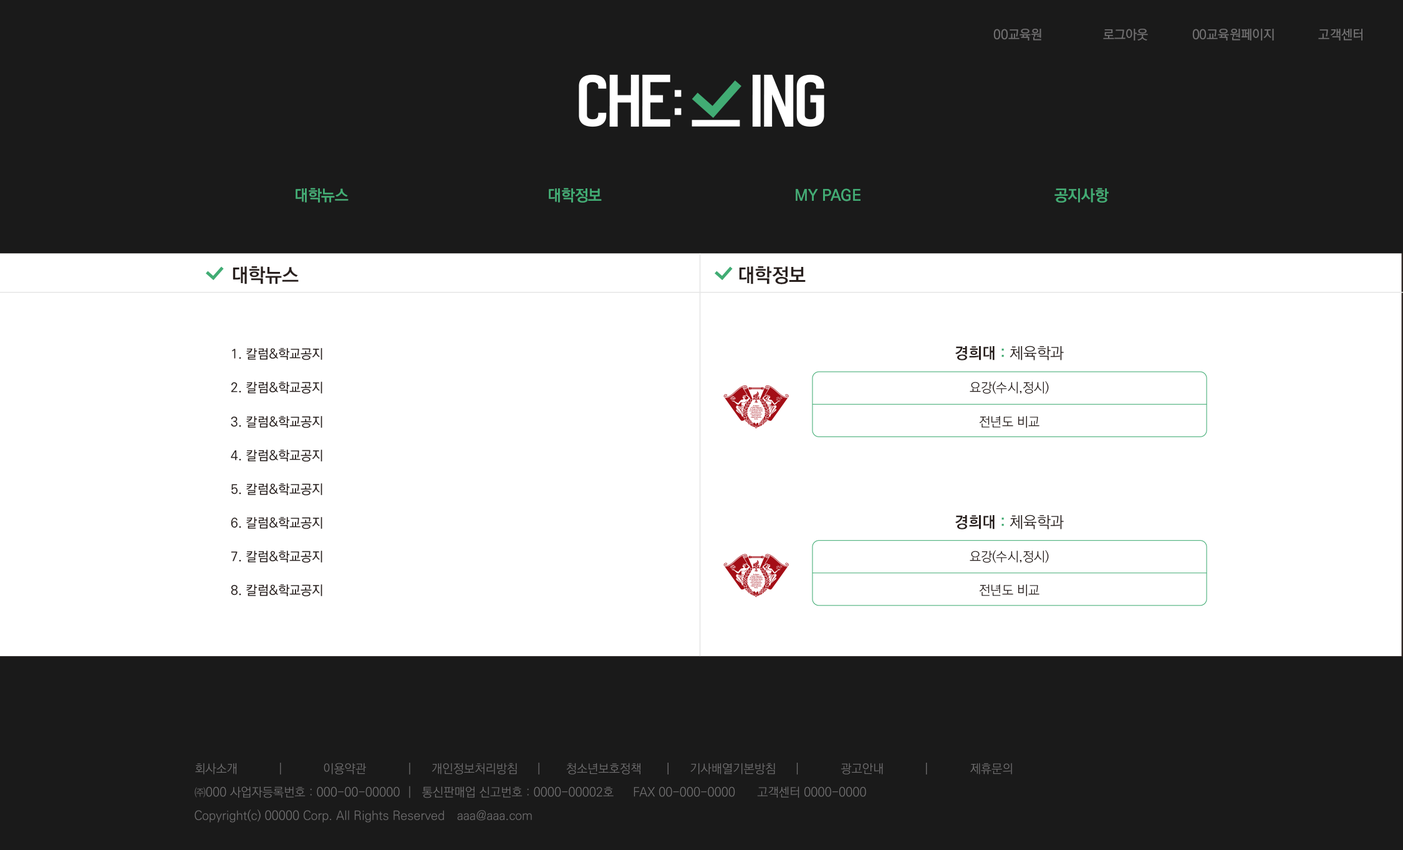
<style>
.page{position:relative;width:1403px;height:850px;background:#1a1a1a}
.page>*{position:absolute;margin:0}
.t1{font:13px "KoPubWorldDotumPM";color:#717071}
.t2{font:15.6px "KoPubWorldDotumPM";color:#40ac73}
.t3{font:15.6px "KoPubWorldDotumPB";color:#41ac74}
.t4{font:15.6px "KoPubWorldDotumPM";color:#41ac74}
.t5{font:19.5px "KoPubWorldDotumPB";color:#291f1d}
.t6{font:13px/16.9px "KoPubWorldDotumPM";color:#291f1d}
.t7{font:13px/16.9px "KoPubWorldDotumPL";color:#291f1d}
.t8{font:15.6px/16.9px "KoPubWorldDotumPB";color:#291f1d}
.t9{font:15.6px/16.9px "KoPubWorldDotumPB";color:#41ac74}
.t10{font:15.6px/16.9px "KoPubWorldDotumPL";color:#291f1d}
</style>
<div class="page">
<p class="t1" style="left:993px;top:29px;width:48px;height:12px">00교육원</p>
<p class="t1" style="left:1103px;top:29px;width:45px;height:12px">로그아웃</p>
<p class="t1" style="left:1192px;top:29px;width:82px;height:12px">00교육원페이지</p>
<p class="t1" style="left:1318px;top:29px;width:44px;height:12px">고객센터</p>
<p class="t2" style="left:296px;top:188px;width:53px;height:15px">대학뉴스</p>
<p class="t3" style="left:296px;top:188px;width:53px;height:15px">대학뉴스</p>
<p class="t2" style="left:549px;top:188px;width:53px;height:15px">대학정보</p>
<p class="t3" style="left:549px;top:188px;width:53px;height:15px">대학정보</p>
<p class="t4" style="left:796px;top:188px;width:65px;height:13px">MY PAGE</p>
<p class="t3" style="left:796px;top:188px;width:65px;height:13px">MY PAGE</p>
<p class="t2" style="left:1054px;top:188px;width:55px;height:15px">공지사항</p>
<p class="t3" style="left:1054px;top:188px;width:55px;height:15px">공지사항</p>
<p class="t5" style="left:233px;top:266px;width:66px;height:18px">대학뉴스</p>
<p class="t5" style="left:739px;top:266px;width:67px;height:18px">대학정보</p>
<p class="t6" style="left:231px;top:348px;width:91px;height:249px">1. 칼럼&amp;학교공지<br><br>2. 칼럼&amp;학교공지<br><br>3. 칼럼&amp;학교공지<br><br>4. 칼럼&amp;학교공지<br><br>5. 칼럼&amp;학교공지<br><br>6. 칼럼&amp;학교공지<br><br>7. 칼럼&amp;학교공지<br><br>8. 칼럼&amp;학교공지</p>
<p class="t7" style="left:955px;top:345px;width:109px;height:83px;text-align:center"><span class="t8">경희대</span><span class="t9"> : </span><span class="t10">체육학과<br></span><br>요강(수시,정시)<br><br>전년도 비교</p>
<p class="t7" style="left:955px;top:514px;width:109px;height:82px;text-align:center"><span class="t8">경희대</span><span class="t9"> : </span><span class="t10">체육학과<br></span><br>요강(수시,정시)<br><br>전년도 비교</p>
</div>
